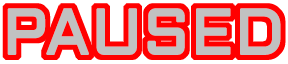
<style>
.page{position:relative;width:288px;height:64px;background:#ff0000}
.page>*{position:absolute;margin:0}
.t1{font:64px "Aldrich";color:#c1c1c1;font-weight:bold}
</style>
<div class="page">
<p class="t1" style="left:7px;top:8px;width:274px;height:47px">PAUSED</p>
</div>
